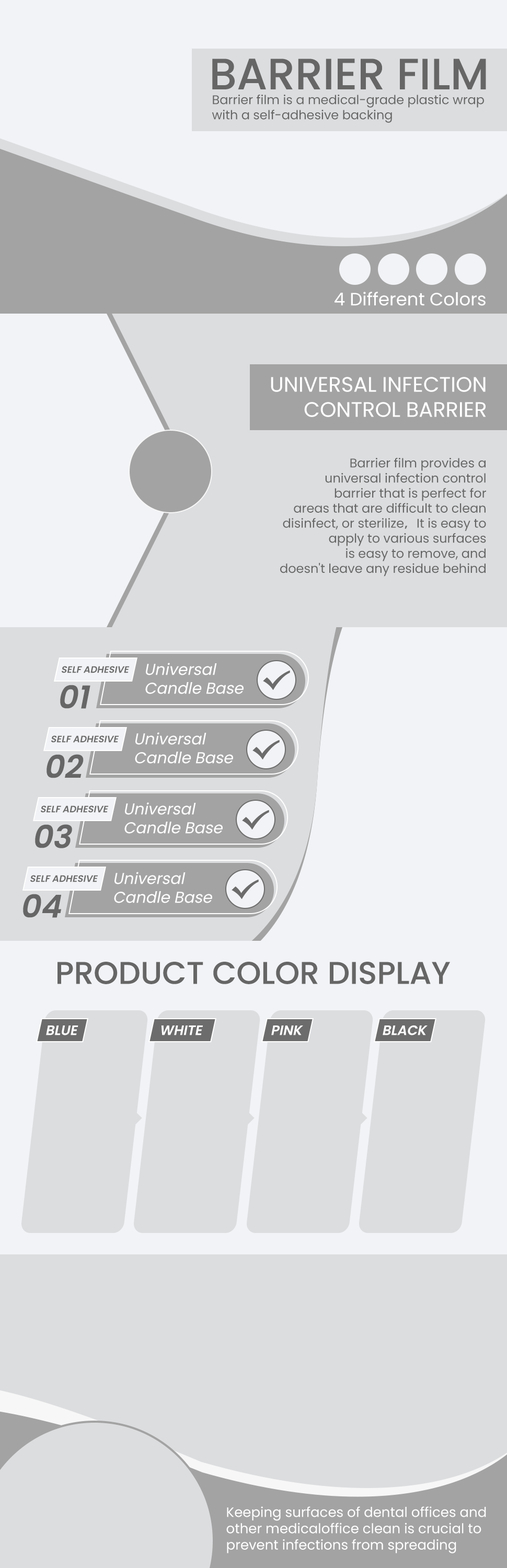
<style>
.page{position:relative;width:507px;height:1568px;background:#dcdddf}
.page>*{position:absolute;margin:0}
.t1{font:43.9px "Poppins-Medium";color:#666666;text-transform:uppercase}
.t2{font:12.5px "Poppins-Regular";color:#666666}
.t3{font:17.8px "Poppins-Regular";color:#ffffff}
.t4{font:20.9px "Poppins-Regular";color:#ffffff;text-transform:uppercase}
.t5{font:12.5px "AdobeHeitiStd-Regular";color:#666666}
.t6{font:9.4px "Poppins-SemiBold";color:#6c6c6c;text-transform:uppercase;font-style:italic}
.t7{font:15.7px "Poppins-Regular";color:#ffffff;font-style:italic}
.t8{font:31.4px "Poppins-SemiBold";color:#666666;font-style:italic}
.t9{font:31.4px "Poppins-Medium";color:#666666;text-transform:uppercase}
.t10{font:13.6px "Poppins-SemiBold";color:#ffffff;text-transform:uppercase;font-style:italic}
.t11{font:13.6px "Poppins-Regular";color:#ffffff}
</style>
<div class="page">
<p class="t1" style="left:212px;top:59px;width:274px;height:30px">BARRIER FILM</p>
<p class="t2" style="left:212px;top:95px;width:272px;height:28px">Barrier film is a medical-grade plastic wrap<br>with a self-adhesive backing</p>
<p class="t3" style="left:335px;top:292px;width:151px;height:14px">4 Different Colors</p>
<p class="t4" style="left:271px;top:377px;width:215px;height:40px;text-align:right">UNIVERSAL INFECTION<br>CONTROL BARRIER</p>
<p class="t2" style="left:280px;top:458px;width:206px;height:119px;text-align:right">Barrier film provides a<br>universal infection control<br>barrier that is perfect for<br>areas that are difficult to clean<br>disinfect, or sterilize<span class="t5">，</span>It is easy to<br>apply to various surfaces<br>is easy to remove, and<br>doesn't leave any residue behind</p>
<p class="t6" style="left:62px;top:666px;width:68px;height:7px">self adhesive</p>
<p class="t7" style="left:145px;top:663px;width:99px;height:31px">Universal<br>Candle Base</p>
<p class="t8" style="left:60px;top:685px;width:30px;height:24px">01</p>
<p class="t6" style="left:51px;top:735px;width:68px;height:8px">self adhesive</p>
<p class="t7" style="left:135px;top:732px;width:98px;height:32px">Universal<br>Candle Base</p>
<p class="t8" style="left:47px;top:754px;width:37px;height:24px">02</p>
<p class="t6" style="left:41px;top:805px;width:68px;height:8px">self adhesive</p>
<p class="t7" style="left:124px;top:802px;width:99px;height:32px">Universal<br>Candle Base</p>
<p class="t8" style="left:35px;top:824px;width:37px;height:24px">03</p>
<p class="t6" style="left:30px;top:875px;width:68px;height:7px">self adhesive</p>
<p class="t7" style="left:114px;top:872px;width:98px;height:31px">Universal<br>Candle Base</p>
<p class="t8" style="left:23px;top:894px;width:38px;height:24px">04</p>
<p class="t9" style="left:57px;top:962px;width:393px;height:22px">Product color display</p>
<p class="t10" style="left:46px;top:1025px;width:32px;height:10px">BLUE</p>
<p class="t10" style="left:161px;top:1025px;width:42px;height:10px">WHITE</p>
<p class="t10" style="left:271px;top:1025px;width:32px;height:10px">PINK</p>
<p class="t10" style="left:383px;top:1025px;width:45px;height:10px">BLACK</p>
<p class="t11" style="left:226px;top:1506px;width:260px;height:47px">Keeping surfaces of dental offices and<br>other medicaloffice clean is crucial to<br>prevent infections from spreading</p>
</div>
